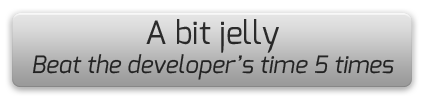
<style>
.page{position:relative;width:425px;height:100px}
.page>*{position:absolute;margin:0}
.t1{font:24px "Exo-Italic";color:#242424}
.t2{font:32px "Exo-Regular";color:#242424}
</style>
<div class="page">
<p class="t1" style="left:32px;top:19px;width:362px;height:61px;text-align:center"><span class="t2">A bit jelly<br></span>Beat the developer’s time 5 times</p>
</div>
